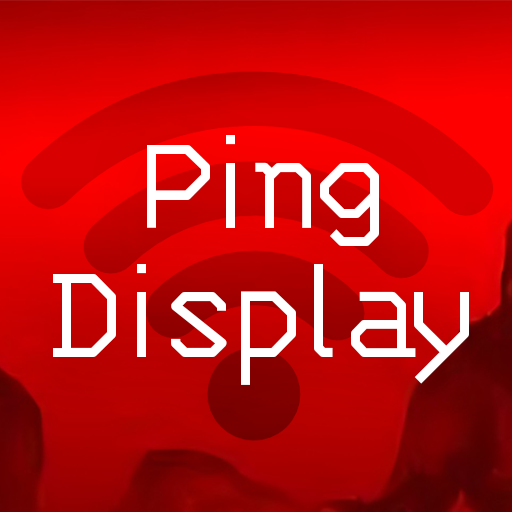
<style>
.page{position:relative;width:512px;height:512px}
.page>*{position:absolute;margin:0}
.t1{font:151.3px/129.1px "3270-Regular";letter-spacing:-0.12em;color:#ffffff}
</style>
<div class="page">
<p class="t1" style="left:53px;top:135px;width:416px;height:250px;text-align:center">Ping<br>Display</p>
</div>
